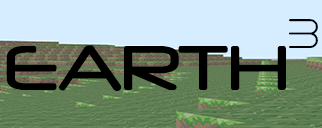
<style>
.page{position:relative;width:322px;height:128px;background:#d6ecff}
.page>*{position:absolute;margin:0}
.t1{font:42.2px "VerminVibes2Nightclub";color:#000000}
.t2{font:73.9px "Neuropol";color:#000000}
</style>
<div class="page">
<p class="t1" style="left:289px;top:19px;width:29px;height:29px">3</p>
<p class="t2" style="left:6px;top:45px;width:280px;height:46px">EARTH</p>
</div>
